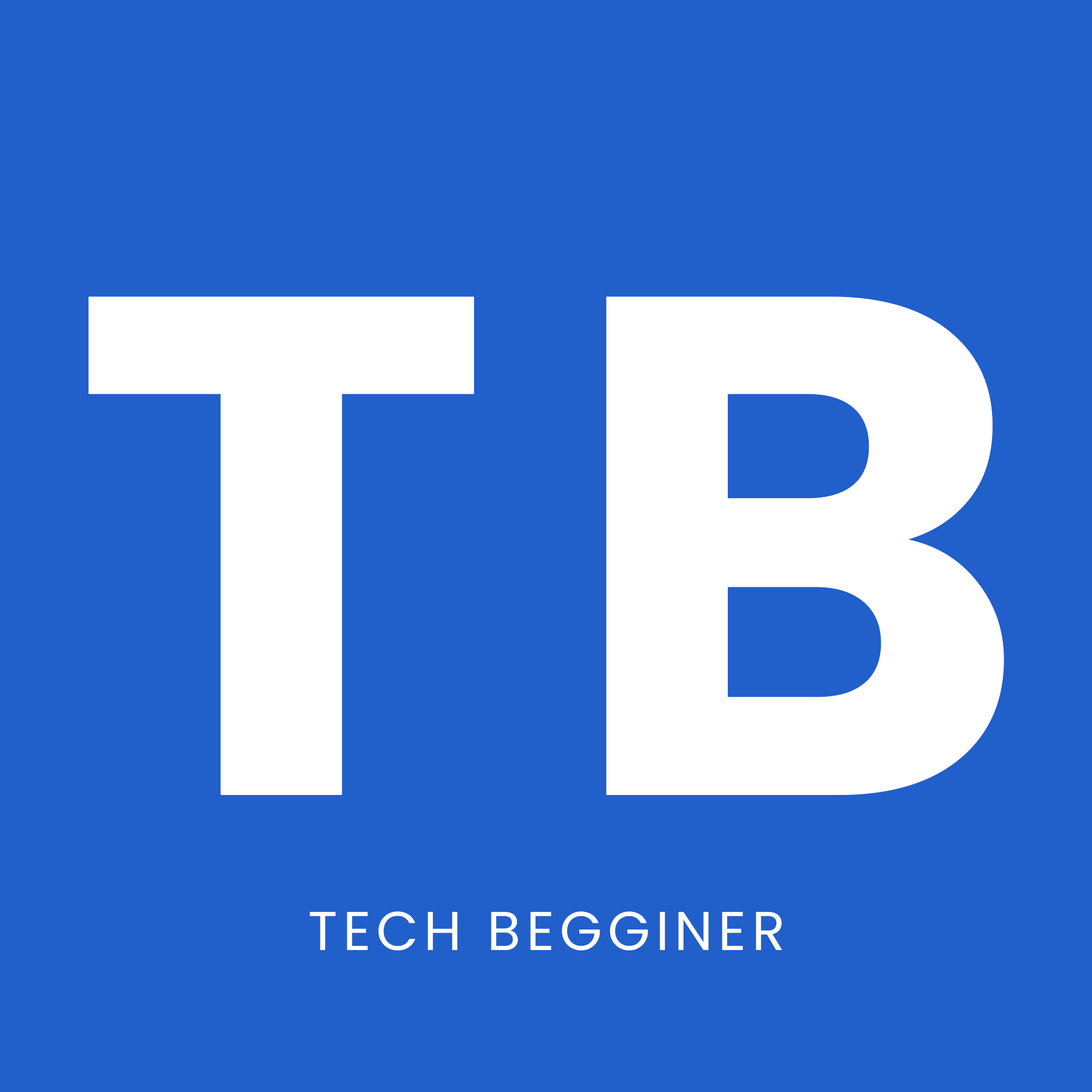
<style>
.page{position:relative;width:1092px;height:1092px;background:#215fca}
.page>*{position:absolute;margin:0}
.t1{font:709.8px "Poppins-Bold";letter-spacing:0.1em;color:#ffffff}
.t2{font:54.6px "Poppins-Regular";letter-spacing:0.1em;color:#ffffff;text-transform:uppercase}
</style>
<div class="page">
<p class="t1" style="left:88px;top:296px;width:916px;height:499px">TB</p>
<p class="t2" style="left:310px;top:911px;width:472px;height:40px">tech begginer</p>
</div>
